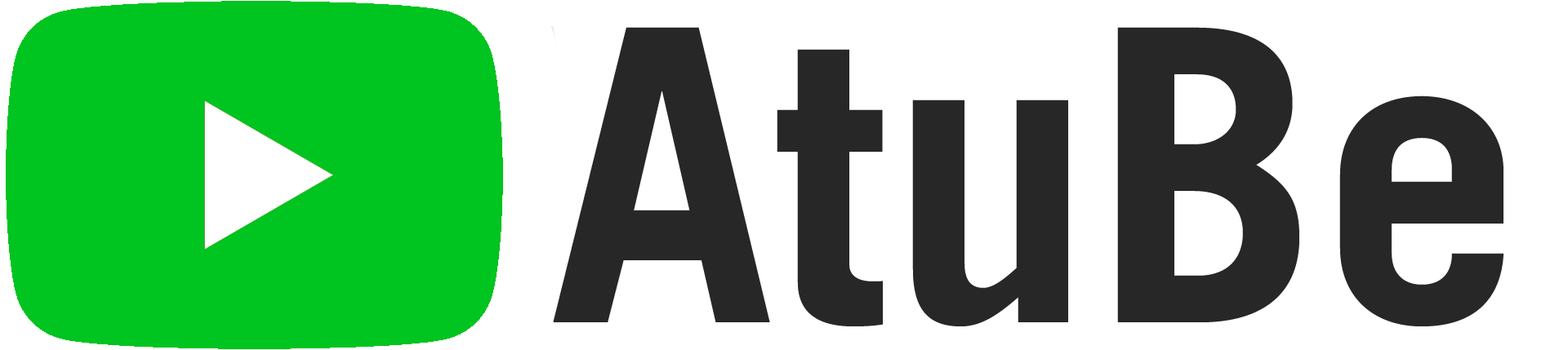
<style>
.page{position:relative;width:1568px;height:350px;background:#ffffff}
.page>*{position:absolute;margin:0}
.t1{font:408.3px "TradeGothicLTStd-Bold";color:#272727}
</style>
<div class="page">
<p class="t1" style="left:553px;top:27px;width:950px;height:300px">AtuBe</p>
</div>
